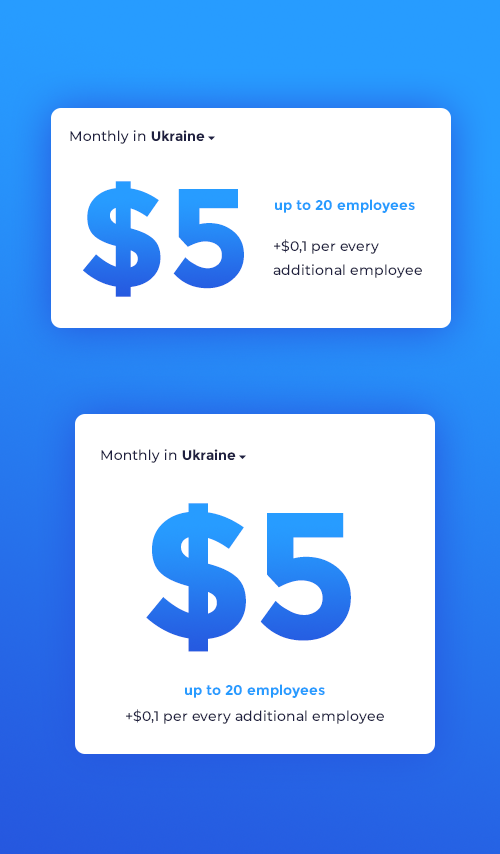
<style>
.page{position:relative;width:500px;height:854px;background:#ffffff}
.page>*{position:absolute;margin:0}
.t1{font:14px "Montserrat-Medium";color:#1f2040}
.t2{font:14px "Montserrat-Bold";color:#1f2040}
.t3{font:140px "Montserrat-Bold"}
.t4{font:14px "Montserrat-Bold";color:#279cff}
.t5{font:180px "Montserrat-Bold"}
</style>
<div class="page">
<p class="t1" style="left:70px;top:130px;width:135px;height:14px">Monthly in <span class="t2">Ukraine</span></p>
<p class="t3" style="left:83px;top:181px;width:161px;height:116px">$5</p>
<p class="t4" style="left:275px;top:199px;width:140px;height:14px">up to 20 employees</p>
<p class="t1" style="left:273px;top:239px;width:149px;height:39px">+$0,1 per every <br>additional employee</p>
<p class="t1" style="left:101px;top:449px;width:135px;height:14px">Monthly in <span class="t2">Ukraine</span></p>
<p class="t5" style="left:146px;top:503px;width:205px;height:149px">$5</p>
<p class="t4" style="left:185px;top:684px;width:140px;height:14px">up to 20 employees</p>
<p class="t1" style="left:126px;top:709px;width:258px;height:15px">+$0,1 per every additional employee</p>
</div>
